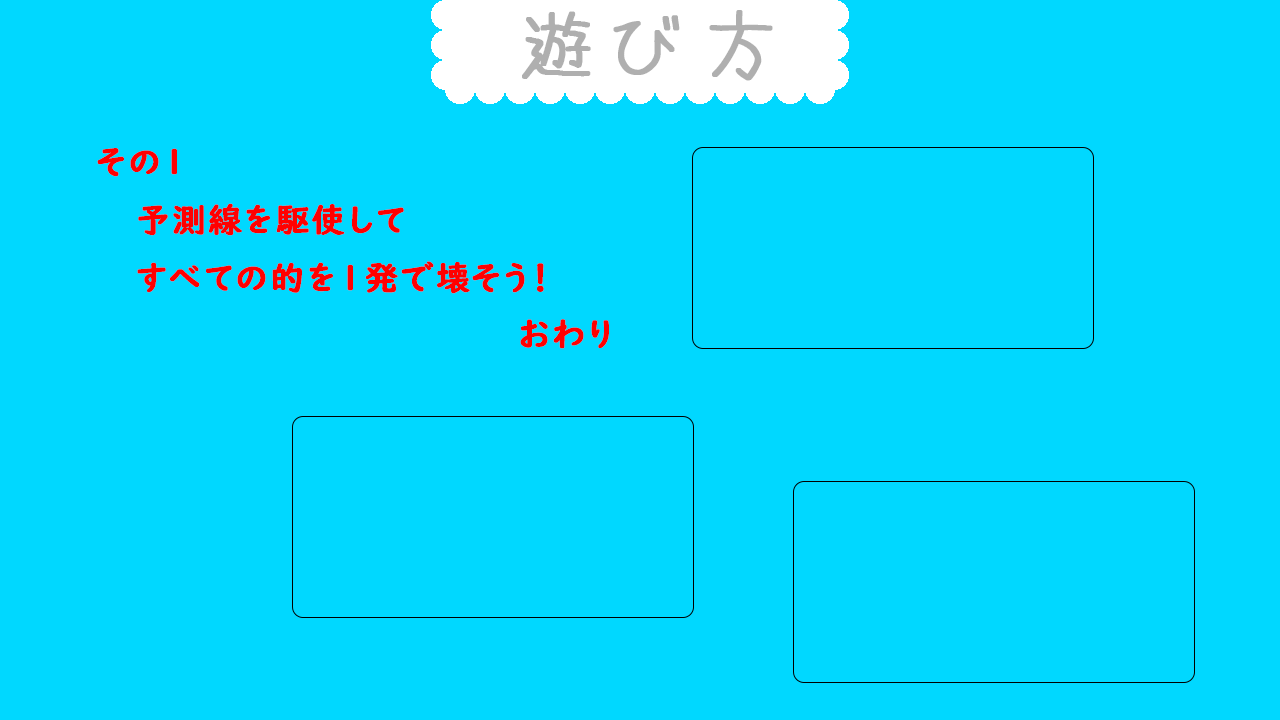
<style>
.page{position:relative;width:1280px;height:720px;background:#00d8ff}
.page>*{position:absolute;margin:0}
.t1{font:75px "azuki_font";letter-spacing:0.2em;color:#afafaf;font-weight:bold}
.t2{font:33.3px "UDDigiKyokashoNK-B";letter-spacing:0.05em;color:#ff0000;font-weight:bold}
</style>
<div class="page">
<p class="t1" style="left:522px;top:10px;width:251px;height:71px">遊び方</p>
<p class="t2" style="left:97px;top:148px;width:80px;height:29px">その１</p>
<p class="t2" style="left:137px;top:203px;width:407px;height:91px">予測線を駆使して<br>すべての的を１発で壊そう！</p>
<p class="t2" style="left:520px;top:319px;width:89px;height:30px">おわり</p>
</div>
